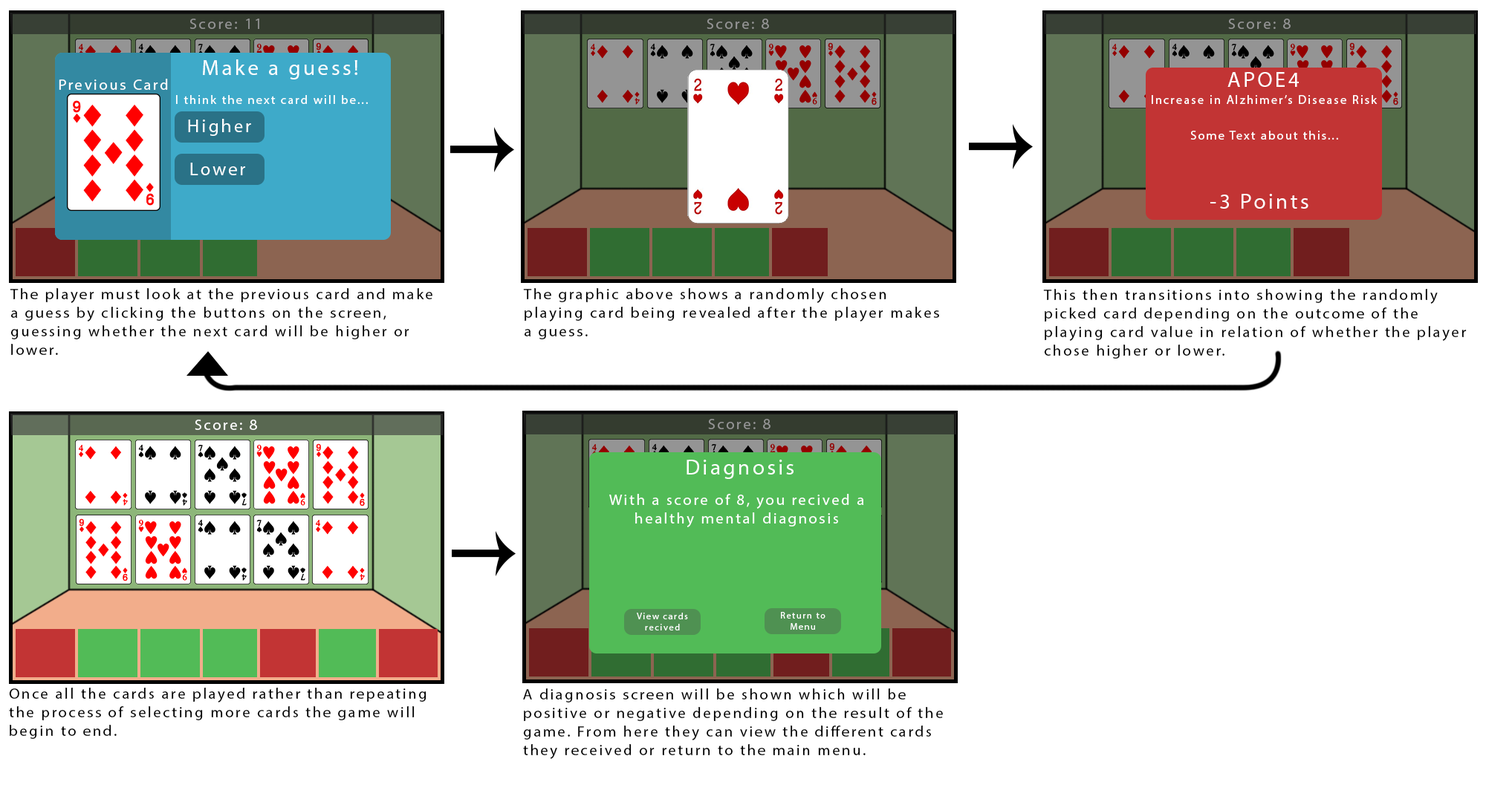
<style>
.page{position:relative;width:1486px;height:802px;background:#ffffff}
.page>*{position:absolute;margin:0}
.t1{font:15.5px "MyriadPro-Regular";letter-spacing:0.12em;color:#949494}
.t2{font:21.7px "MyriadPro-Regular";letter-spacing:0.12em;color:#ffffff}
.t3{font:15.5px "MyriadPro-Regular";letter-spacing:0.12em;color:#ffffff}
.t4{font:12.4px "MyriadPro-Regular";letter-spacing:0.12em;color:#ffffff}
.t5{font:18.6px "MyriadPro-Regular";letter-spacing:0.12em;color:#ffffff}
.t6{font:15.5px "MyriadPro-Regular";letter-spacing:0.12em;color:#000000}
.t7{font:9.3px "MyriadPro-Regular";letter-spacing:0.12em;color:#ffffff}
</style>
<div class="page">
<p class="t1" style="left:189px;top:19px;width:70px;height:10px">Score: 11</p>
<p class="t1" style="left:707px;top:19px;width:62px;height:10px">Score: 8</p>
<p class="t1" style="left:1228px;top:19px;width:63px;height:10px">Score: 8</p>
<p class="t2" style="left:203px;top:59px;width:154px;height:21px">Make a guess!</p>
<p class="t2" style="left:1227px;top:72px;width:72px;height:15px">APOE4</p>
<p class="t3" style="left:59px;top:79px;width:109px;height:11px">Previous Card</p>
<p class="t4" style="left:176px;top:95px;width:192px;height:9px">I think the next card will be...</p>
<p class="t4" style="left:1152px;top:95px;width:226px;height:9px">Increase in Alzhimer’s Disease Risk</p>
<p class="t5" style="left:188px;top:119px;width:63px;height:17px">Higher</p>
<p class="t4" style="left:1190px;top:131px;width:148px;height:9px">Some Text about this...</p>
<p class="t5" style="left:190px;top:163px;width:55px;height:12px">Lower</p>
<p class="t2" style="left:1210px;top:194px;width:98px;height:15px">-3 Points</p>
<p class="t6" style="left:10px;top:288px;width:422px;height:67px">The player must look at the previous card and make a guess by clicking the buttons on the screen, guessing whether the next card will be higher or lower.</p>
<p class="t6" style="left:523px;top:288px;width:416px;height:52px">The graphic above shows a randomly chosen playing card being revealed after the player makes a guess.<span class="t7">h</span></p>
<p class="t6" style="left:1043px;top:289px;width:424px;height:70px">This then transitions into showing the randomly picked card depending on the outcome of the playing card value in relation of whether the player chose higher or lower.</p>
<p class="t3" style="left:195px;top:420px;width:62px;height:10px">Score: 8</p>
<p class="t1" style="left:708px;top:419px;width:62px;height:10px">Score: 8</p>
<p class="t2" style="left:687px;top:460px;width:107px;height:19px">Diagnosis</p>
<p class="t3" style="left:609px;top:494px;width:255px;height:34px;text-align:center">With a score of 8, you recived a<br>healthy mental diagnosis</p>
<p class="t7" style="left:637px;top:613px;width:51px;height:18px;text-align:center">View cards<br>recived</p>
<p class="t7" style="left:781px;top:612px;width:44px;height:18px;text-align:center">Return to<br>Menu</p>
<p class="t6" style="left:9px;top:688px;width:417px;height:51px">Once all the cards are played rather than repeating the process of selecting more cards the game will begin to end.</p>
<p class="t6" style="left:523px;top:689px;width:420px;height:70px">A diagnosis screen will be shown which will be positive or negative depending on the result of the game. From here they can view the different cards they received or return to the main menu.</p>
</div>
